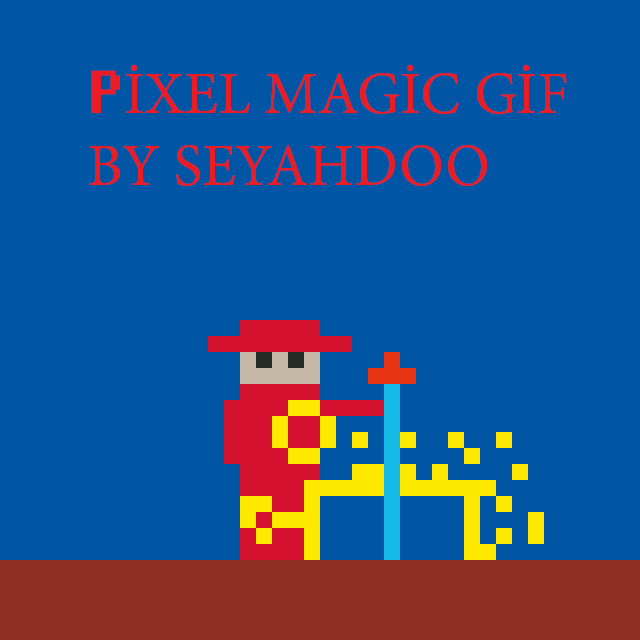
<style>
.page{position:relative;width:640px;height:640px;background:#0056a4}
.page>*{position:absolute;margin:0}
.t1{font:60px "MinionPro-Regular";color:#ec1c24}
.t2{font:60px "Fixedsys";color:#ec1c24}
</style>
<div class="page">
<p class="t1" style="left:89px;top:64px;width:478px;height:122px"><span class="t2">P</span>İXEL MAGİC GİF<br>BY SEYAHDOO</p>
</div>
